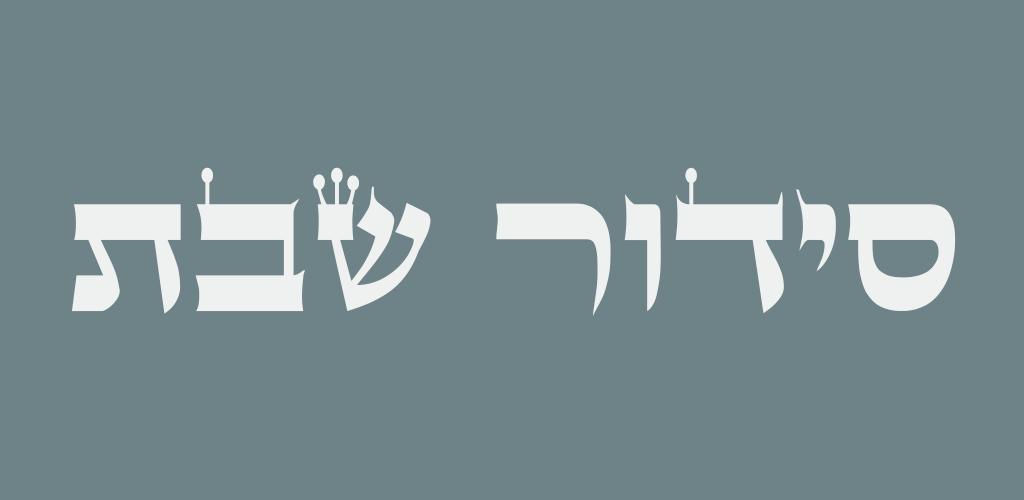
<style>
.page{position:relative;width:1024px;height:500px;background:#6e8387}
.page>*{position:absolute;margin:0}
.t1{font:208.3px "StamAshkenazCLM";color:#eff1f1}
</style>
<div class="page">
<p class="t1" style="left:72px;top:167px;width:884px;height:149px">תבש רודיס</p>
</div>
